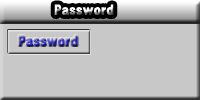
<style>
.page{position:relative;width:200px;height:100px;background:#c8c8c8}
.page>*{position:absolute;margin:0}
.t1{font:14px "GothicXB-HM"}
</style>
<div class="page">
<p class="t1" style="left:54px;top:4px;width:60px;height:11px">Password</p>
<p class="t1" style="left:18px;top:35px;width:60px;height:11px">Password</p>
</div>
